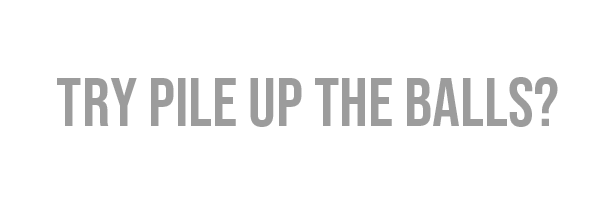
<style>
.page{position:relative;width:594px;height:204px;background:#ffffff}
.page>*{position:absolute;margin:0}
.t1{font:69.3px "BebasNeue-Regular";color:#9c9c9c}
</style>
<div class="page">
<p class="t1" style="left:57px;top:77px;width:501px;height:50px">try pile up the balls?</p>
</div>
